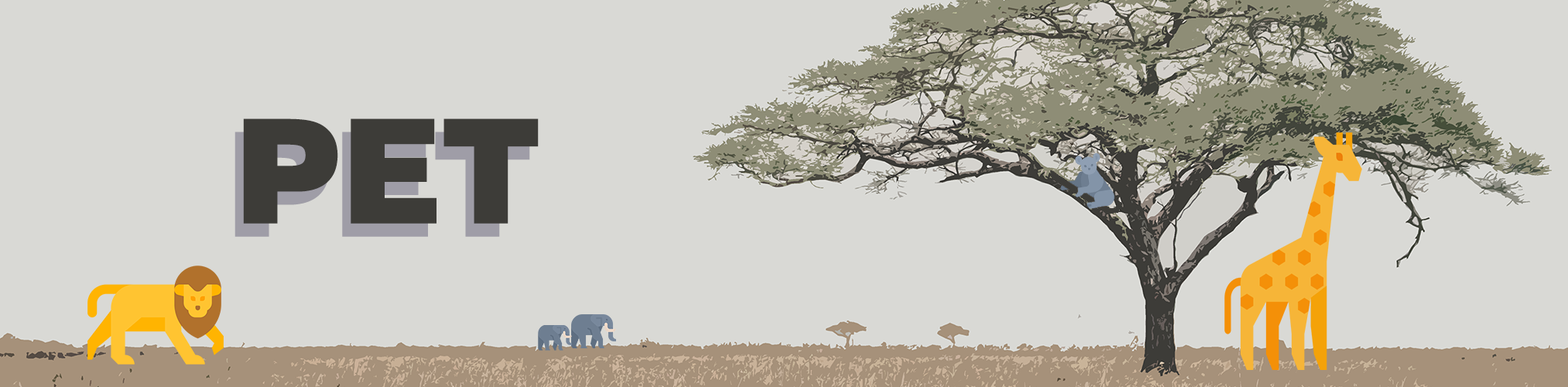
<style>
.page{position:relative;width:1568px;height:387px;background:#d9d9d5}
.page>*{position:absolute;margin:0}
.t1{font:145.4px "Swiss721BT-Black";color:#3d3c38}
</style>
<div class="page">
<p class="t1" style="left:243px;top:118px;width:296px;height:106px">PET</p>
</div>
